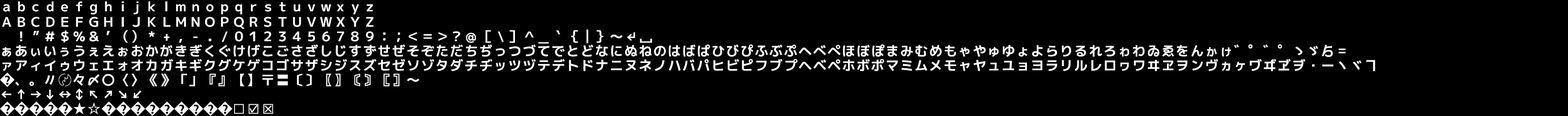
<style>
.page{position:relative;width:1568px;height:116px;background:#000000}
.page>*{position:absolute;margin:0}
.t1{font:13.2px "mplus-1m-bold";color:#ffffff}
</style>
<div class="page">
<p class="t1" style="left:3px;top:1px;width:370px;height:14px">ａｂｃｄｅｆｇｈｉｊｋｌｍｎｏｐｑｒｓｔｕｖｗｘｙｚ</p>
<p class="t1" style="left:2px;top:17px;width:371px;height:12px">ＡＢＣＤＥＦＧＨＩＪＫＬＭＮＯＰＱＲＳＴＵＶＷＸＹＺ</p>
<p class="t1" style="left:20px;top:30px;width:615px;height:14px">！”＃＄％＆’（）*+，-./０１２３４５６７８９：；＜＝＞？＠［\］＾＿｀｛　｝～↵</p>
<p class="t1" style="left:2px;top:44px;width:1344px;height:13px">ぁあぃいぅうぇえぉおかがきぎくぐけげこごさざしじすずせぜそぞただちぢっつづてでとどなにぬねのはばぱひびぴふぶぷへべぺほぼぽまみむめもゃやゅゆょよらりるれろゎわゐゑをんゕゖ゙゚゛゜ゝゞゟ゠</p>
<p class="t1" style="left:2px;top:59px;width:1373px;height:13px">ァアィイゥウェエォオカガキギクグケゲコゴサザシジスズセゼソゾタダチヂッツヅテデトドナニヌネノハバパヒビピフブプヘベペホボポマミムメモャヤュユョヨラリルレロヮワヰヱヲンヴヵヶヷヸヹヺ・ーヽヾヿ</p>
<p class="t1" style="left:15px;top:74px;width:404px;height:13px">、。〃〄々〆〇〈〉《》「」『』【】〒〓〔〕〖〗〘〙〚〛〜</p>
<p class="t1" style="left:1px;top:88px;width:141px;height:13px">←↑→↓↔↕↖↗↘↙</p>
</div>
